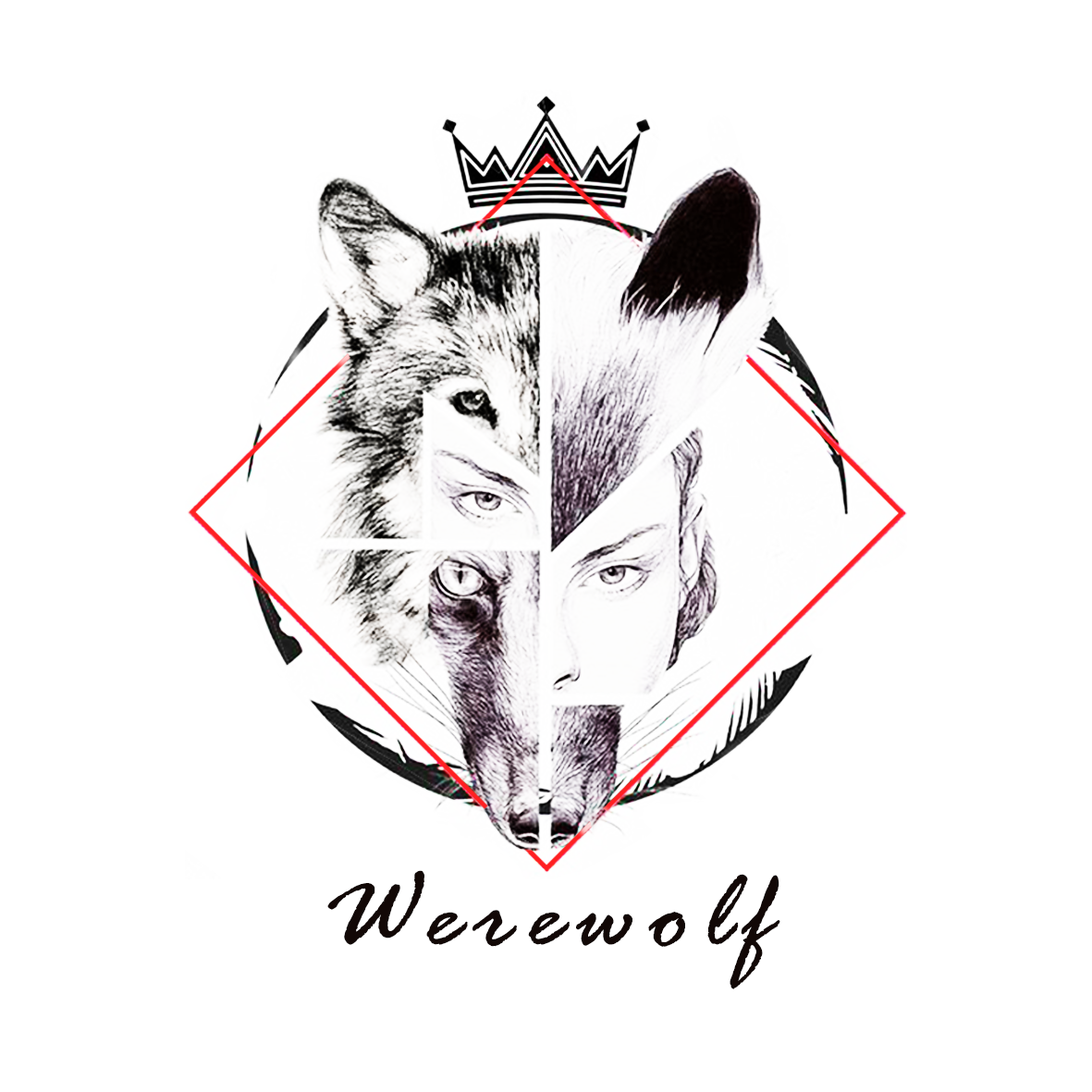
<style>
.page{position:relative;width:1092px;height:1092px;background:#ffffff}
.page>*{position:absolute;margin:0}
.t1{font:115.6px "RageItalic";letter-spacing:0.1em;color:#120806}
</style>
<div class="page">
<p class="t1" style="left:327px;top:870px;width:453px;height:119px">Werewolf</p>
</div>
